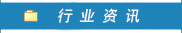
<style>
.page{position:relative;width:182px;height:33px;background:#1f84ba}
.page>*{position:absolute;margin:0}
.t1{font:15px "SimHei";color:#ffffff;font-style:italic}
</style>
<div class="page">
<p class="t1" style="left:58px;top:8px;width:82px;height:15px">行 业 资 讯</p>
</div>
